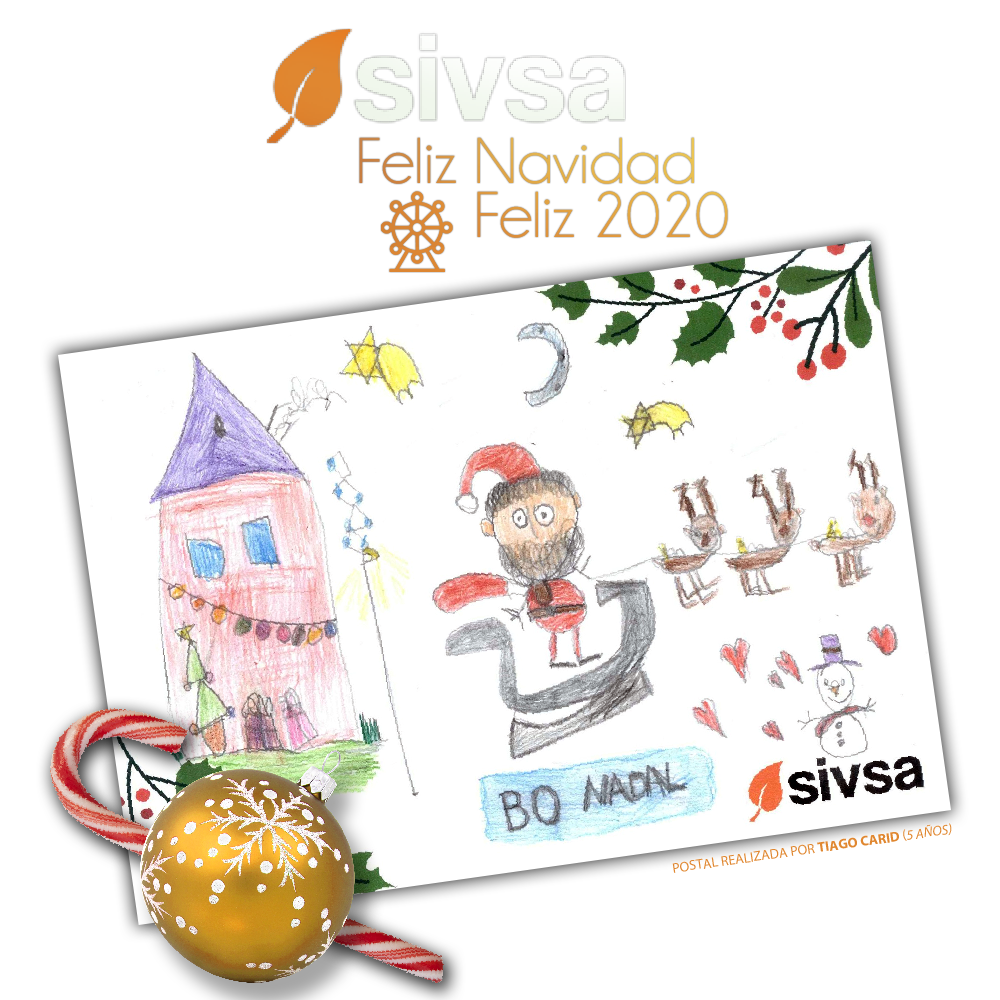
<style>
.page{position:relative;width:1000px;height:1000px;background:#ffffff}
.page>*{position:absolute;margin:0}
.t1{font:65.6px "Champagne&Limousines"}
.t2{font:65.6px "Champagne&Limousines";color:#e19d41}
.t3{font:14px "MyriadPro-Regular";color:#e08730;text-transform:uppercase}
.t4{font:14px "MyriadPro-Bold";color:#e08730;text-transform:uppercase}
.t5{font:14px "MyriadPro-It";color:#e08730;text-transform:uppercase}
</style>
<div class="page">
<p class="t1" style="left:359px;top:137px;width:335px;height:47px">Feliz Navidad</p>
<p class="t2" style="left:477px;top:191px;width:251px;height:47px">Feliz 2020</p>
<p class="t3" style="left:672px;top:823px;width:280px;height:50px;rotate:-8deg">Postal realizada por <span class="t4">Tiago Carid </span>(<span class="t5">5 años)</span></p>
</div>
